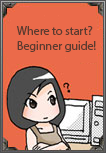
<style>
.page{position:relative;width:106px;height:153px;background:#eb6a4a}
.page>*{position:absolute;margin:0}
.t1{font:12px "MyriadPro-Regular";color:#5b3b30}
</style>
<div class="page">
<p class="t1" style="left:16px;top:26px;width:80px;height:26px">Where to start?<br>Beginner guide!</p>
</div>
